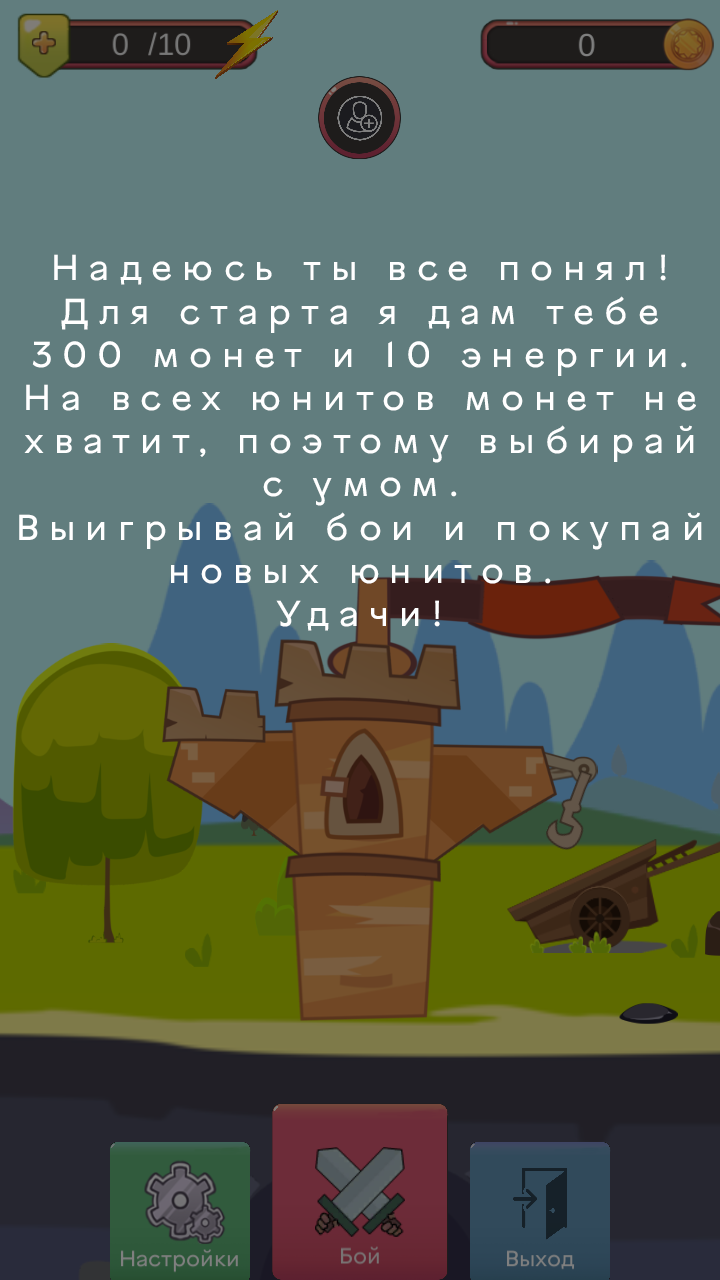
<style>
.page{position:relative;width:720px;height:1280px;background:#617d7e}
.page>*{position:absolute;margin:0}
.t1{font:36px "VinnytsiaSansReg";letter-spacing:0.28em;color:#ffffff}
</style>
<div class="page">
<p class="t1" style="left:19px;top:254px;width:683px;height:377px;text-align:center">Надеюсь ты все понял!<br>Для старта я дам тебе <br>300 монет и 10 энергии.<br>На всех юнитов монет не хватит, поэтому выбирай с умом.<br>Выигрывай бои и покупай новых юнитов.<br>Удачи!</p>
</div>
